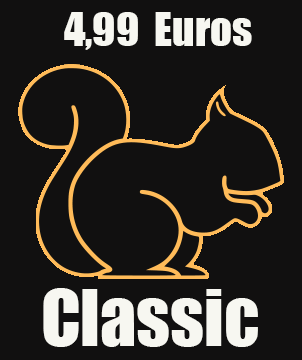
<style>
.page{position:relative;width:302px;height:360px;background:#111010}
.page>*{position:absolute;margin:0}
.t1{font:43.2px "Impact";color:#f7f7f1}
.t2{font:72px "Impact";color:#f7f7f1}
</style>
<div class="page">
<p class="t1" style="left:64px;top:12px;width:188px;height:38px">4,99  Euros</p>
<p class="t2" style="left:43px;top:288px;width:215px;height:59px">Classic</p>
</div>
